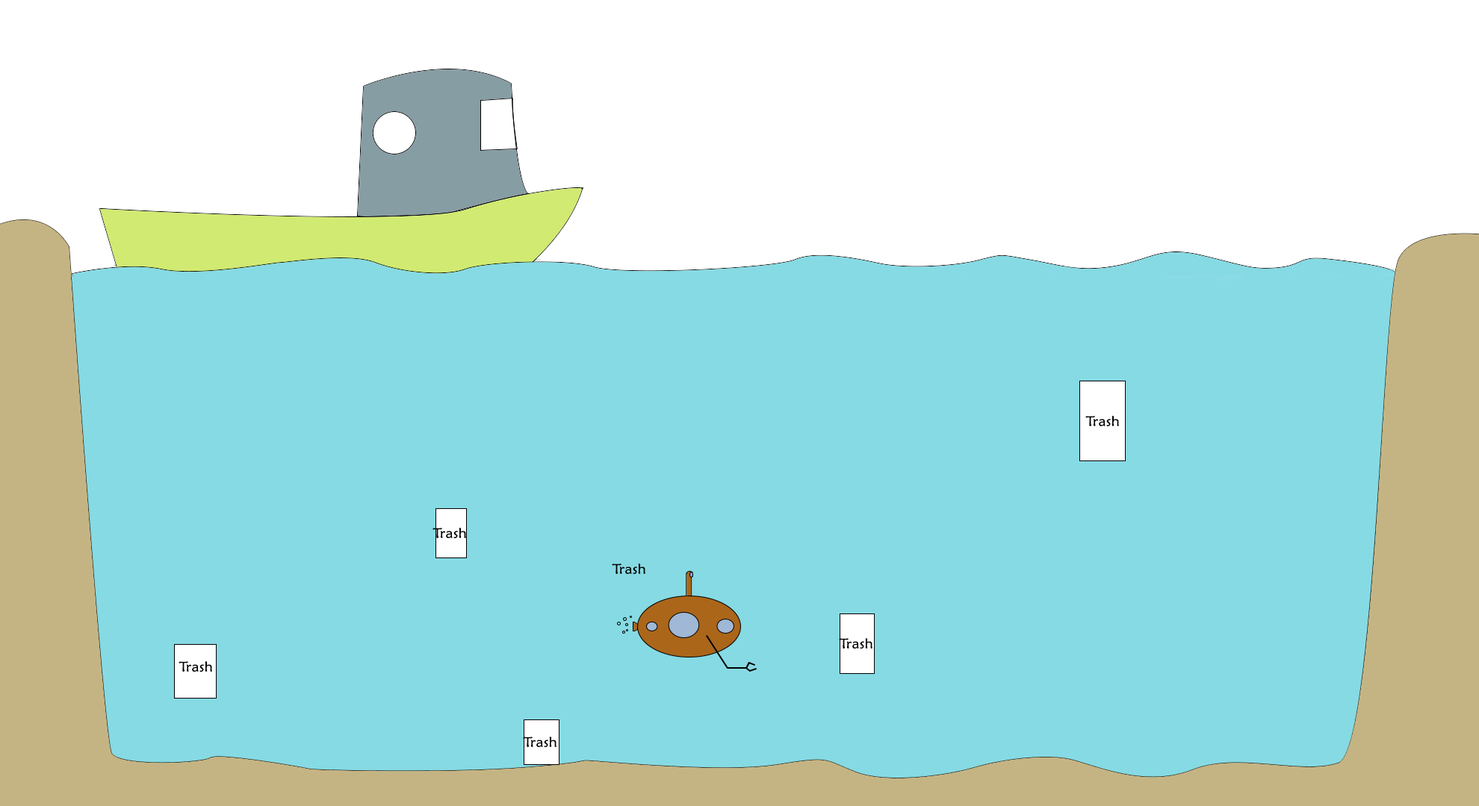
<style>
.page{position:relative;width:1479px;height:806px;background:#86dae3}
.page>*{position:absolute;margin:0}
.t1{font:14.1px "MaiandraGD-Regular";color:#000000;scale:1.1 1}
</style>
<div class="page">
<p class="t1" style="left:1085px;top:416px;width:34px;height:11px">Trash</p>
<p class="t1" style="left:432px;top:528px;width:34px;height:11px">Trash</p>
<p class="t1" style="left:612px;top:564px;width:33px;height:11px">Trash</p>
<p class="t1" style="left:839px;top:638px;width:33px;height:12px">Trash</p>
<p class="t1" style="left:178px;top:662px;width:34px;height:11px">Trash</p>
<p class="t1" style="left:523px;top:737px;width:33px;height:11px">Trash</p>
</div>
